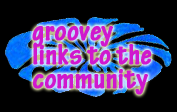
<style>
.page{position:relative;width:177px;height:112px;background:#000000}
.page>*{position:absolute;margin:0}
.t1{font:30px/24px "TektonPro-BoldCond";color:#d018ce;font-weight:bold}
</style>
<div class="page">
<p class="t1" style="left:32px;top:26px;width:120px;height:69px">groovey<br>links to the<br>community</p>
</div>
